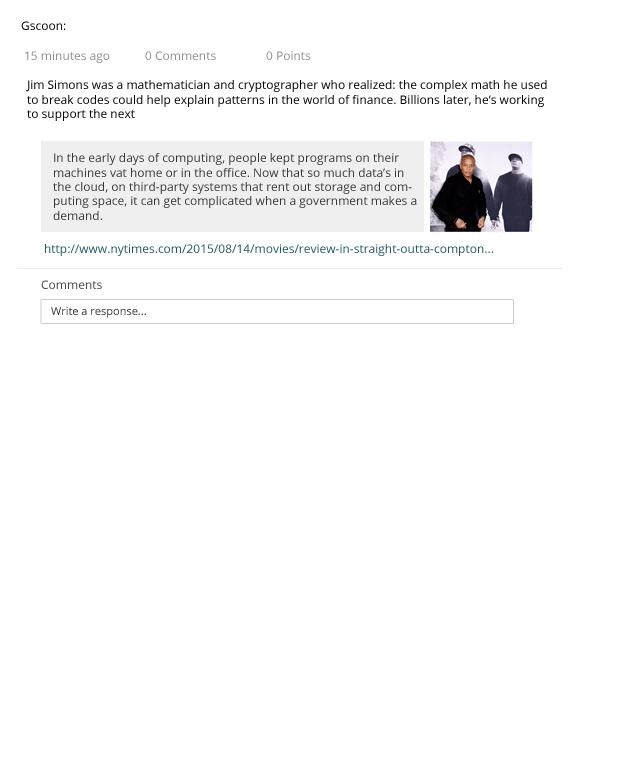
<style>
.page{position:relative;width:622px;height:783px;background:#ffffff}
.page>*{position:absolute;margin:0}
.t1{font:12px "OpenSans";color:#010101}
.t2{font:12px "OpenSans";color:#8e8e8e}
.t3{font:12px "OpenSans";color:#373737}
.t4{font:12px "OpenSans";color:#205666}
.t5{font:12px "OpenSans";color:#444444}
.t6{font:11px "OpenSans";color:#353535}
</style>
<div class="page">
<p class="t1" style="left:21px;top:21px;width:45px;height:9px">Gscoon:</p>
<p class="t2" style="left:25px;top:51px;width:85px;height:12px">15 minutes ago</p>
<p class="t2" style="left:145px;top:51px;width:71px;height:9px">0 Comments</p>
<p class="t2" style="left:266px;top:51px;width:45px;height:9px">0 Points</p>
<p class="t1" style="left:26px;top:80px;width:521px;height:41px">Jim Simons was a mathematician and cryptographer who realized: the complex math he used to break codes could help explain patterns in the world of finance. Billions later, he’s working to support the next</p>
<p class="t3" style="left:53px;top:153px;width:364px;height:67px">In the early days of computing, people kept programs on their machines vat home or in the office. Now that so much data’s in the cloud, on third-party systems that rent out storage and computing space, it can get complicated when a government makes a demand.</p>
<p class="t4" style="left:45px;top:244px;width:448px;height:12px">http://www.nytimes.com/2015/08/14/movies/review-in-straight-outta-compton...</p>
<p class="t5" style="left:41px;top:280px;width:61px;height:9px">Comments</p>
<p class="t6" style="left:51px;top:306px;width:95px;height:12px">Write a response...</p>
</div>
